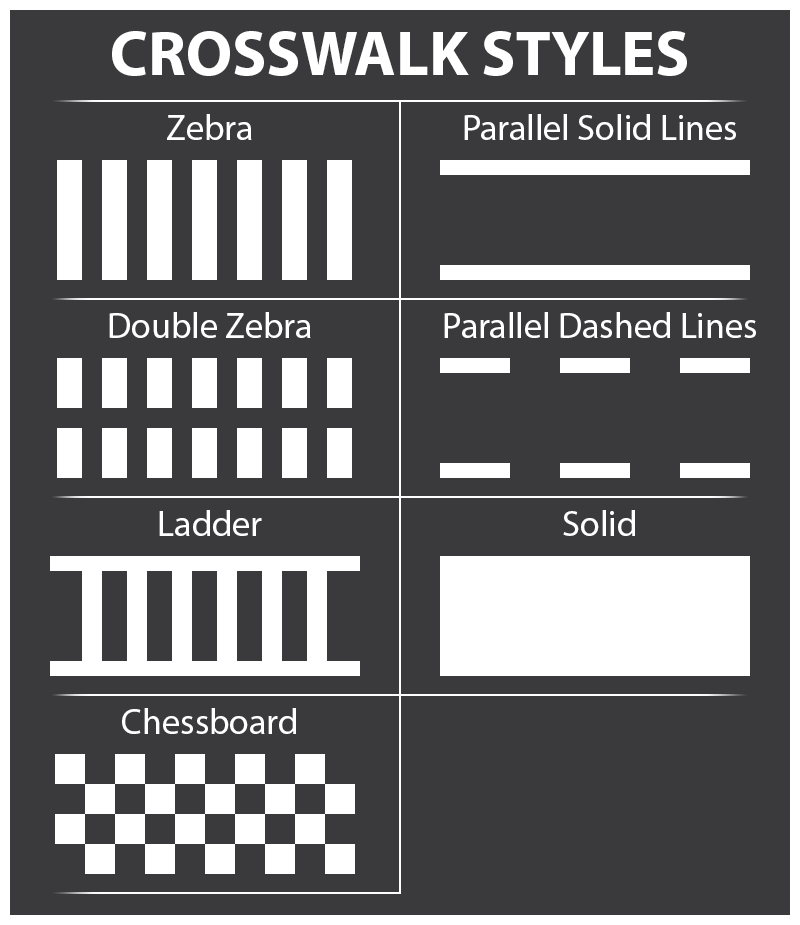
<style>
.page{position:relative;width:800px;height:925px;background:#3a3a3c}
.page>*{position:absolute;margin:0}
.t1{font:64px "MyriadPro-Bold";color:#ffffff}
.t2{font:36px "MyriadPro-Regular";color:#ffffff}
</style>
<div class="page">
<p class="t1" style="left:112px;top:31px;width:575px;height:45px">CROSSWALK STYLES</p>
<p class="t2" style="left:167px;top:114px;width:85px;height:26px">Zebra</p>
<p class="t2" style="left:464px;top:114px;width:272px;height:26px">Parallel Solid Lines</p>
<p class="t2" style="left:109px;top:312px;width:202px;height:26px">Double Zebra</p>
<p class="t2" style="left:444px;top:312px;width:312px;height:26px">Parallel Dashed Lines</p>
<p class="t2" style="left:159px;top:510px;width:103px;height:26px">Ladder</p>
<p class="t2" style="left:563px;top:510px;width:72px;height:26px">Solid</p>
<p class="t2" style="left:122px;top:708px;width:174px;height:26px">Chessboard</p>
</div>
